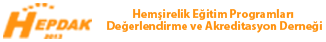
<style>
.page{position:relative;width:326px;height:42px;background:#ffffff}
.page>*{position:absolute;margin:0}
.t1{font:12px/12px "MyriadPro-Bold";color:#ff9311}
</style>
<div class="page">
<p class="t1" style="left:107px;top:9px;width:215px;height:24px;text-align:center">Hemşirelik Eğitim Programları <br>Değerlendirme ve Akreditasyon Derneği</p>
</div>
